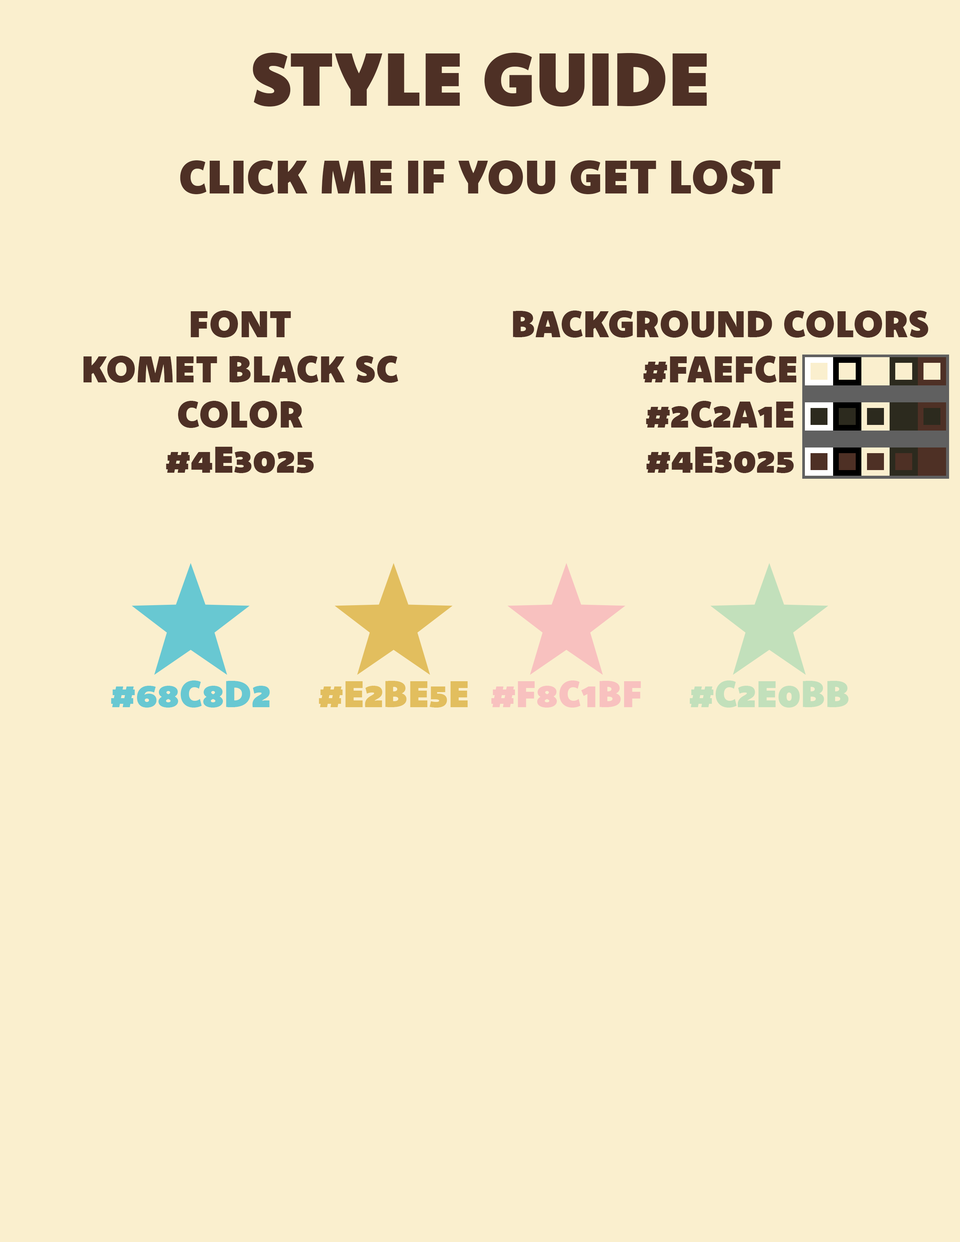
<style>
.page{position:relative;width:960px;height:1242px;background:#faefce}
.page>*{position:absolute;margin:0}
.t1{font:47.1px "Komet-BlackSC";color:#4e3025;text-transform:uppercase}
.t2{font:75.3px "Komet-BlackSC";color:#4e3025;text-transform:uppercase}
.t3{font:37.6px "Komet-BlackSC";color:#4e3025;text-transform:uppercase}
.t4{font:37.6px "Komet-BlackSC";color:#68c8d2;text-transform:uppercase}
.t5{font:37.6px "Komet-BlackSC";color:#e2be5e;text-transform:uppercase}
.t6{font:37.6px "Komet-BlackSC";color:#f8c1bf;text-transform:uppercase}
.t7{font:37.6px "Komet-BlackSC";color:#c2e0bb;text-transform:uppercase}
</style>
<div class="page">
<p class="t1" style="left:180px;top:53px;width:600px;height:141px;text-align:center"><span class="t2">Style Guide<br></span>Click Me if you Get Lost</p>
<p class="t3" style="left:83px;top:311px;width:315px;height:162px;text-align:center">Font<br>Komet Black SC<br>Color<br>#4e3025</p>
<p class="t3" style="left:513px;top:311px;width:415px;height:162px;text-align:center">Background Colors<br>#FAEFCE<br>#2C2A1E<br>#4e3025</p>
<p class="t4" style="left:111px;top:681px;width:159px;height:27px">#68C8D2</p>
<p class="t5" style="left:319px;top:681px;width:149px;height:27px">#E2BE5E</p>
<p class="t6" style="left:491px;top:681px;width:150px;height:27px">#F8C1BF</p>
<p class="t7" style="left:690px;top:681px;width:158px;height:27px">#C2E0BB</p>
</div>
